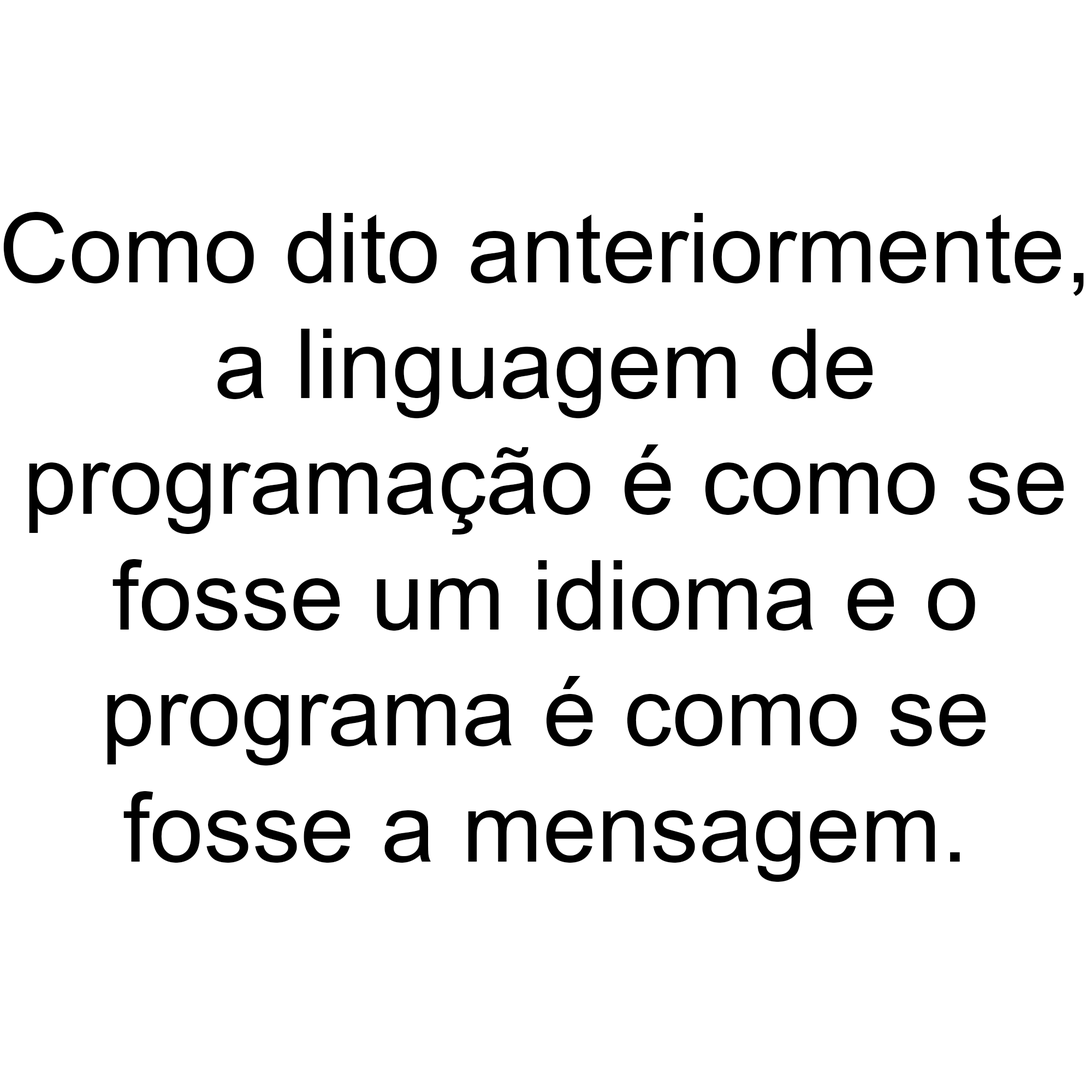
<style>
.page{position:relative;width:1092px;height:1092px;background:#ffffff}
.page>*{position:absolute;margin:0}
.t1{font:96.5px "ArialMT";color:#000000}
</style>
<div class="page">
<p class="t1" style="left:3px;top:212px;width:1081px;height:670px;text-align:center">Como dito anteriormente,<br>a linguagem de<br>programação é como se<br>fosse um idioma e o<br>programa é como se<br>fosse a mensagem.</p>
</div>
